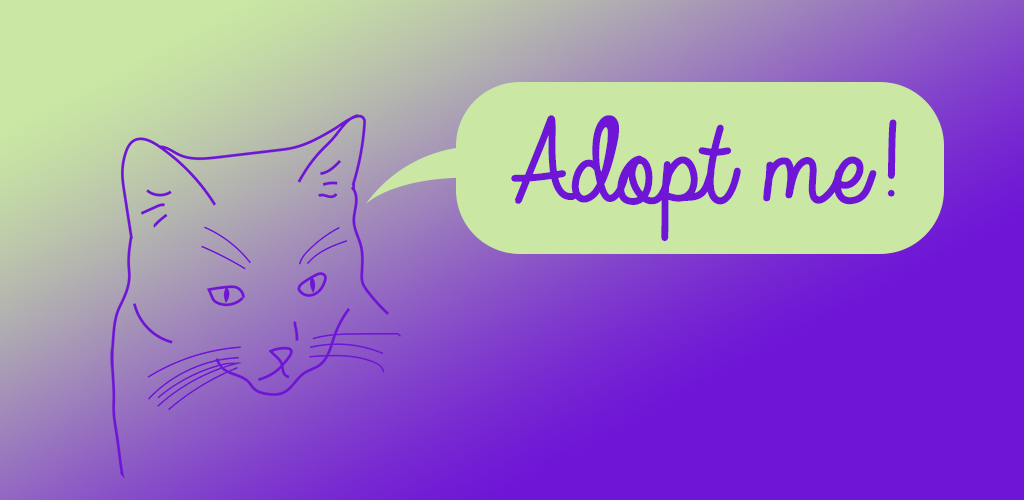
<style>
.page{position:relative;width:1024px;height:500px}
.page>*{position:absolute;margin:0}
.t1{font:125px "AlwaysInMyHeart";color:#6f16d6}
</style>
<div class="page">
<p class="t1" style="left:511px;top:115px;width:386px;height:127px">Adopt me!</p>
</div>
